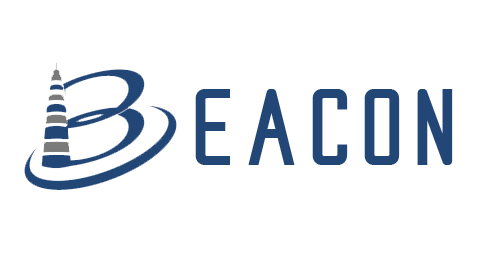
<style>
.page{position:relative;width:490px;height:254px;background:#ffffff}
.page>*{position:absolute;margin:0}
.t1{font:72.9px "Nike200204";letter-spacing:0.095em;color:#224777;text-transform:uppercase;font-weight:bold}
</style>
<div class="page">
<p class="t1" style="left:195px;top:89px;width:258px;height:76px">Eacon</p>
</div>
